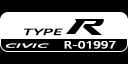
<style>
.page{position:relative;width:128px;height:64px;background:#000000}
.page>*{position:absolute;margin:0}
.t1{font:8.3px "MicrosoftYaHeiUI";color:#000000;font-weight:bold;font-style:italic;scale:2 1}
.t2{font:9.4px "MicrosoftYaHei";color:#ffffff;font-weight:bold;scale:1.33 1}
.t3{font:5.2px "MicrosoftYaHeiUI";color:#ffffff;font-weight:bold;font-style:italic;scale:3 1}
</style>
<div class="page">
<p class="t1" style="left:24px;top:28px;width:39px;height:8px">TYPE</p>
<p class="t2" style="left:64px;top:41px;width:52px;height:8px">R-01997</p>
<p class="t3" style="left:6px;top:43px;width:43px;height:5px">CIVIC</p>
</div>
